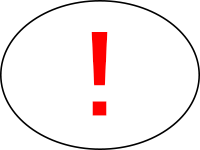
<style>
.page{position:relative;width:200px;height:150px;background:#ffffff}
.page>*{position:absolute;margin:0}
.t1{font:125px "MS-PGothic";color:#ff0000}
</style>
<div class="page">
<p class="t1" style="left:91px;top:32px;width:17px;height:84px">！</p>
</div>
